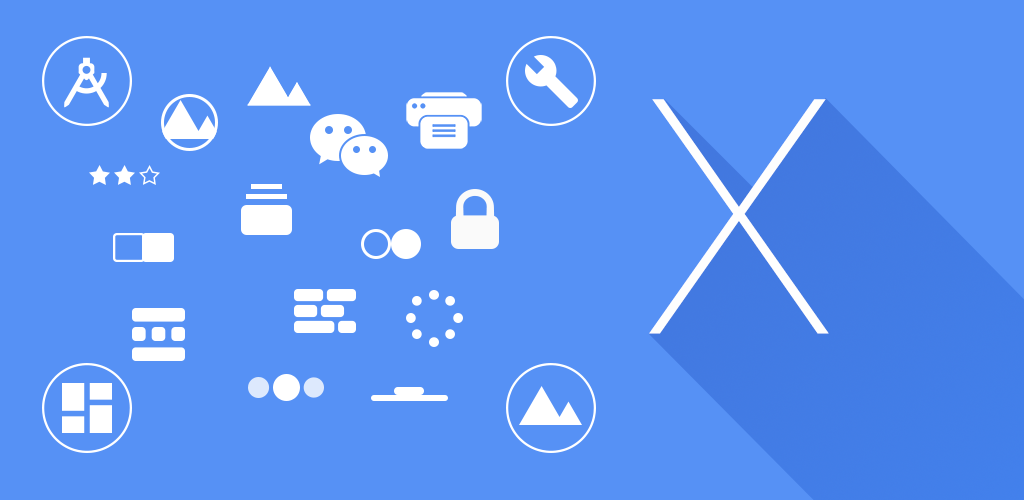
<style>
.page{position:relative;width:1024px;height:500px;background:#5691f5}
.page>*{position:absolute;margin:0}
.t1{font:329.3px "Roboto-Thin";color:#fefefe}
</style>
<div class="page">
<p class="t1" style="left:649px;top:99px;width:180px;height:235px">X</p>
</div>
